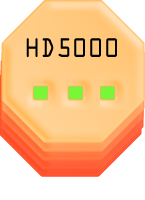
<style>
.page{position:relative;width:145px;height:200px;background:#ffffff}
.page>*{position:absolute;margin:0}
.t1{font:24px "OCRAStd";color:#000000;scale:0.92 1}
</style>
<div class="page">
<p class="t1" style="left:26px;top:38px;width:91px;height:19px">HD5000</p>
</div>
